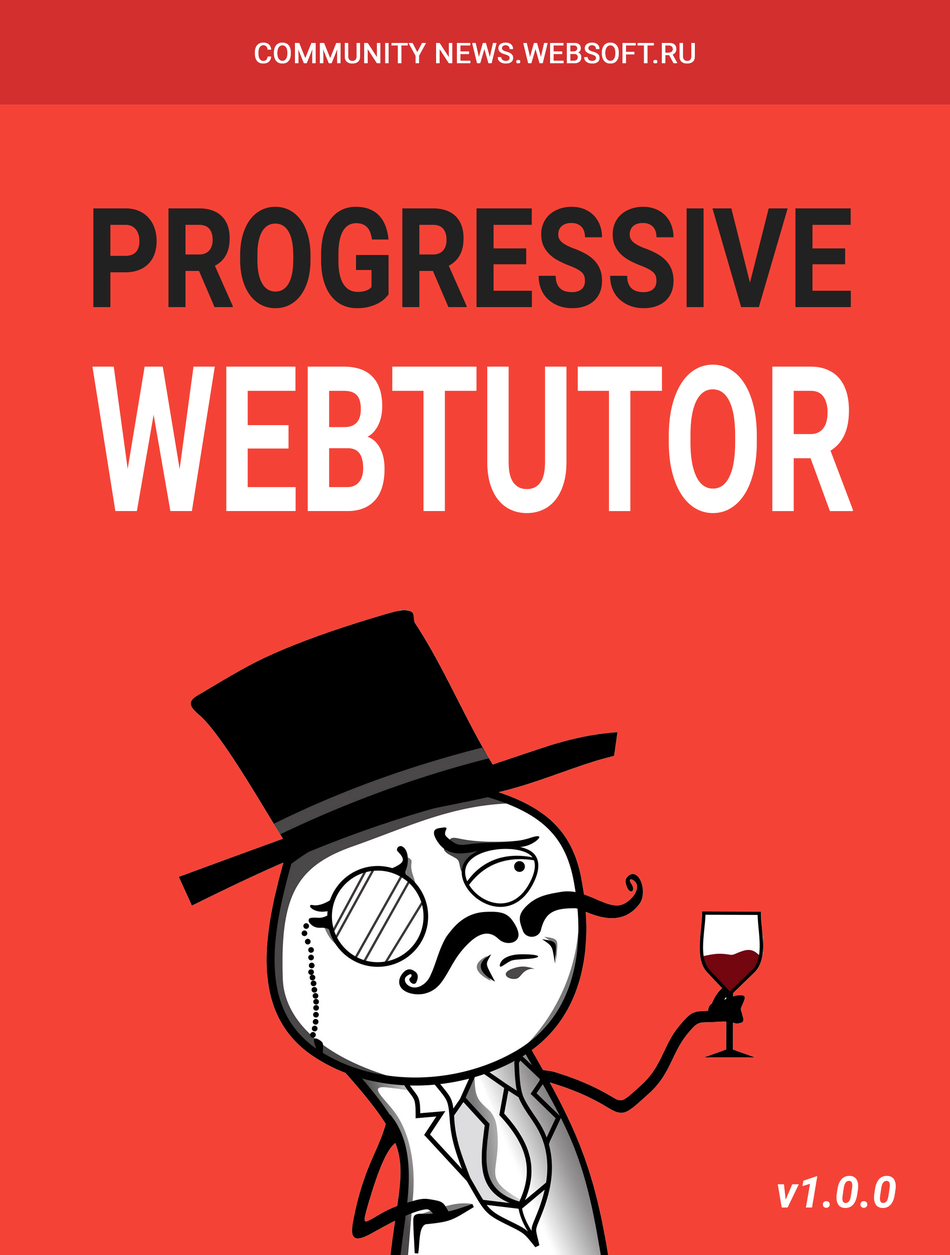
<style>
.page{position:relative;width:950px;height:1255px;background:#f44336}
.page>*{position:absolute;margin:0}
.t1{font:28px "Roboto-Regular";color:#ffffff;text-transform:uppercase;font-weight:bold}
.t2{font:139px "Roboto-Bold";color:#212121;text-transform:uppercase;scale:0.84 1}
.t3{font:203.3px "Roboto-Bold";color:#ffffff;text-transform:uppercase;scale:0.71 1}
.t4{font:43.9px "Roboto-BoldItalic";color:#ffffff}
</style>
<div class="page">
<p class="t1" style="left:255px;top:43px;width:440px;height:21px">COMMUNITY news.websoft.ru</p>
<p class="t2" style="left:93px;top:207px;width:758px;height:102px">Progressive</p>
<p class="t3" style="left:92px;top:365px;width:761px;height:148px">WEBTUTOR</p>
<p class="t4" style="left:778px;top:1176px;width:118px;height:32px">v1.0.0</p>
</div>
